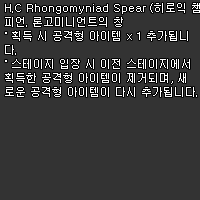
<style>
.page{position:relative;width:200px;height:200px;background:#333333}
.page>*{position:absolute;margin:0}
.t1{font:11px/14px "Dotum";color:#ffffff}
</style>
<div class="page">
<p class="t1" style="left:5px;top:3px;width:195px;height:94px">H.C Rhongomyniad Spear (히로익 챔<br>피언. 론고미니언트의 창<br>˚ 획득 시 공격형 아이템 x 1 추가됩니<br>다.<br>˚ 스테이지 입장 시 이전 스테이지에서<br>획득한 공격형 아이템이 제거되며, 새<br>로운 공격형 아이템이 다시 추가됩니다.</p>
</div>
